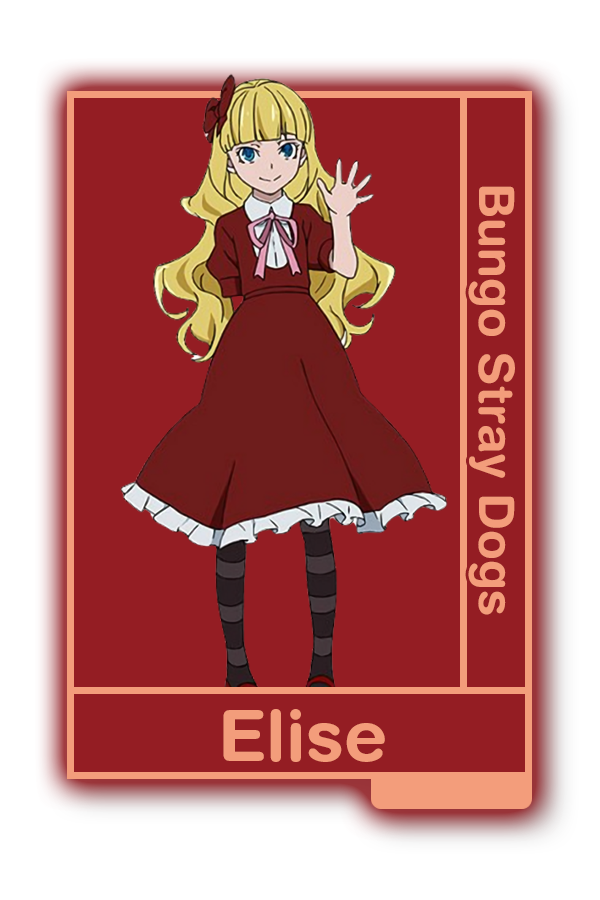
<style>
.page{position:relative;width:600px;height:900px;background:#941d23}
.page>*{position:absolute;margin:0}
.t1{font:48.8px "HelveticaRounded-Bold";color:#f39d7b}
.t2{font:70.8px "HelveticaRounded-Bold";color:#f39d7b}
</style>
<div class="page">
<p class="t1" style="left:468px;top:186px;width:47px;height:429px;rotate:90deg">Bungo Stray Dogs</p>
<p class="t2" style="left:223px;top:709px;width:162px;height:53px">Elise</p>
</div>
